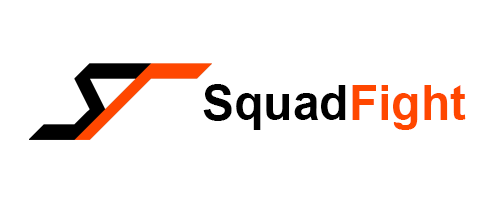
<style>
.page{position:relative;width:500px;height:200px;background:#ffffff}
.page>*{position:absolute;margin:0}
.t1{font:48px "Arial-BoldMT";color:#000000}
.t2{font:48px "Arial-BoldMT";color:#ff4700}
</style>
<div class="page">
<p class="t1" style="left:203px;top:84px;width:263px;height:46px">Squad<span class="t2">Fight</span></p>
</div>
